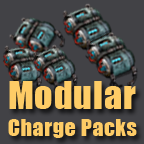
<style>
.page{position:relative;width:144px;height:144px;background:#424246}
.page>*{position:absolute;margin:0}
.t1{font:22px "Impact";letter-spacing:0.025em;color:#fecc66}
.t2{font:36px "Impact";letter-spacing:0.025em;color:#fecc66}
</style>
<div class="page">
<p class="t1" style="left:8px;top:81px;width:129px;height:57px"><span class="t2">Modular<br></span>Charge Packs</p>
</div>
